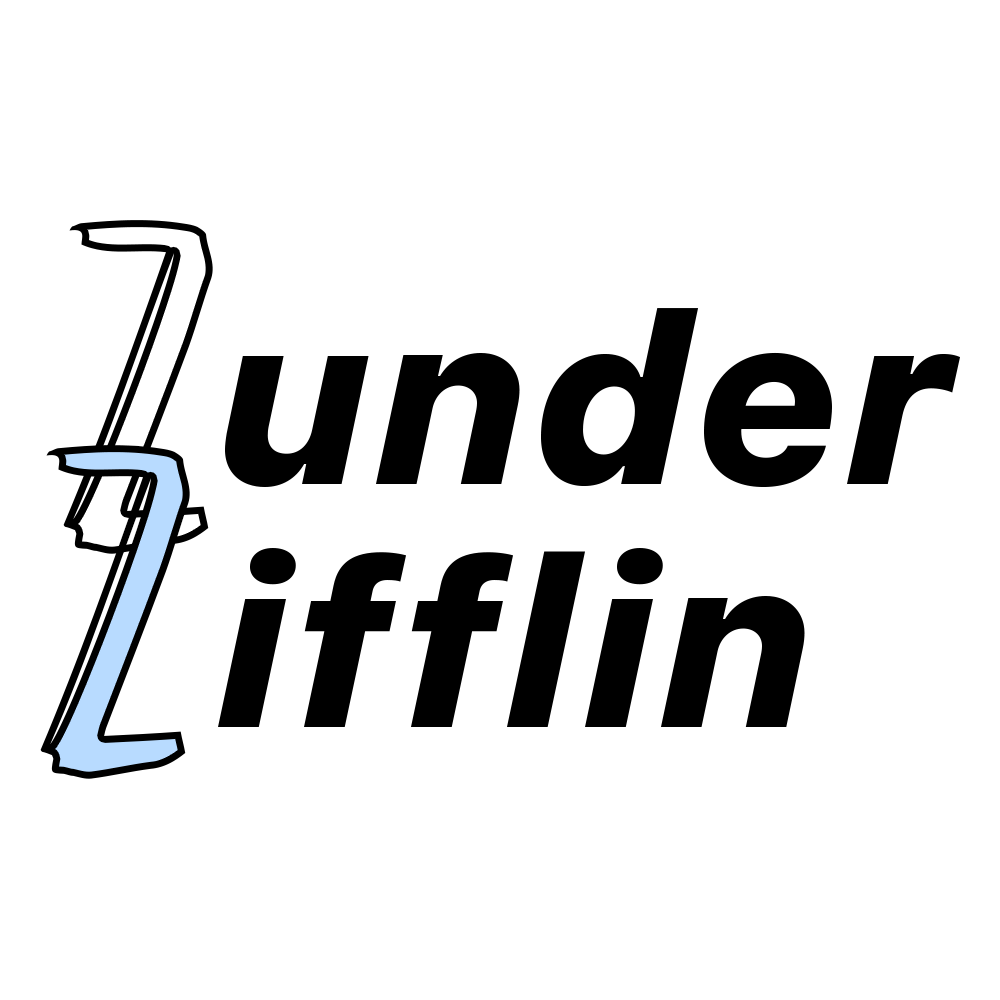
<style>
.page{position:relative;width:1000px;height:1000px;background:#ffffff}
.page>*{position:absolute;margin:0}
.t1{font:665.8px "Story-of-Alundra";letter-spacing:0.015em}
.t2{font:234.9px/242.6px "SFUIText-HeavyItalic";letter-spacing:0.015em;color:#000000}
</style>
<div class="page">
<p class="t1" style="left:63px;top:220px;width:150px;height:334px">z</p>
<p class="t2" style="left:218px;top:308px;width:742px;height:419px">under<br>ifflin</p>
<p class="t1" style="left:40px;top:445px;width:150px;height:334px">z</p>
</div>
